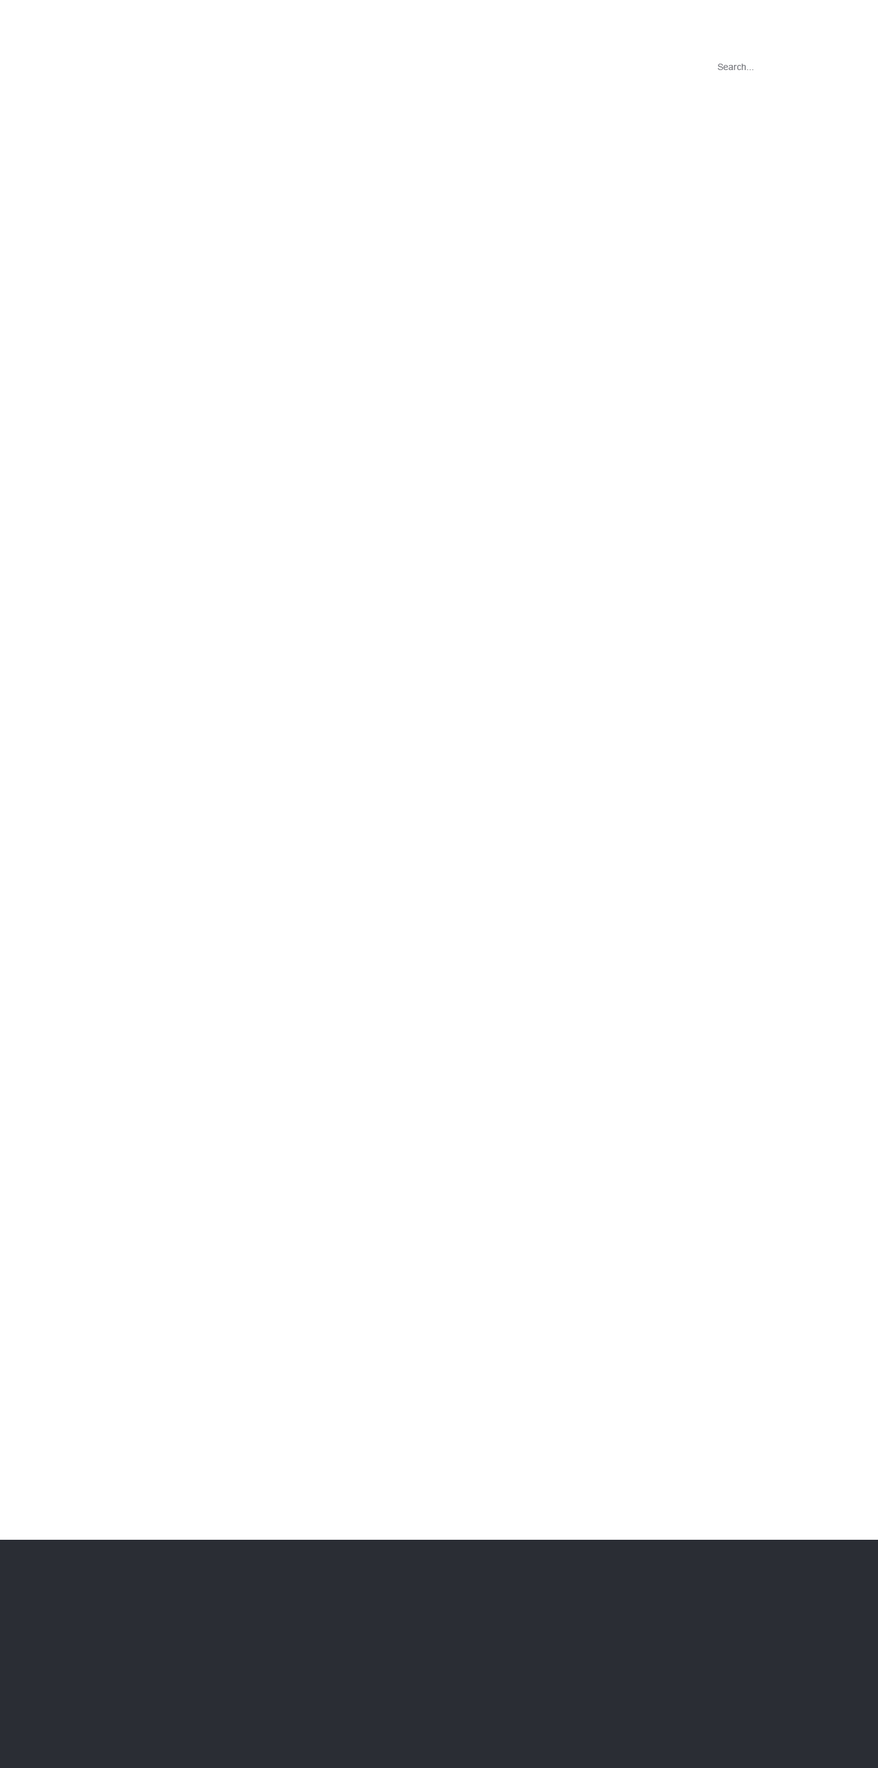
<style>
.page{position:relative;width:878px;height:1768px;background:#ffffff}
.page>*{position:absolute;margin:0}
.t1{font:9px "ArialMT";color:#7e7f84}
</style>
<div class="page">
<p class="t1" style="left:717px;top:64px;width:36px;height:6px">Search...</p>
</div>
